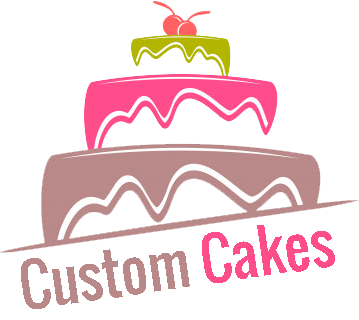
<style>
.page{position:relative;width:359px;height:320px;background:#ffffff}
.page>*{position:absolute;margin:0}
.t1{font:57.2px "Oswald-Regular";color:#b98989}
.t2{font:57.2px "Oswald-Regular";color:#ff4d8b}
</style>
<div class="page">
<p class="t1" style="left:21px;top:225px;width:314px;height:84px;rotate:-8deg">Custom <span class="t2">Cakes</span></p>
</div>
